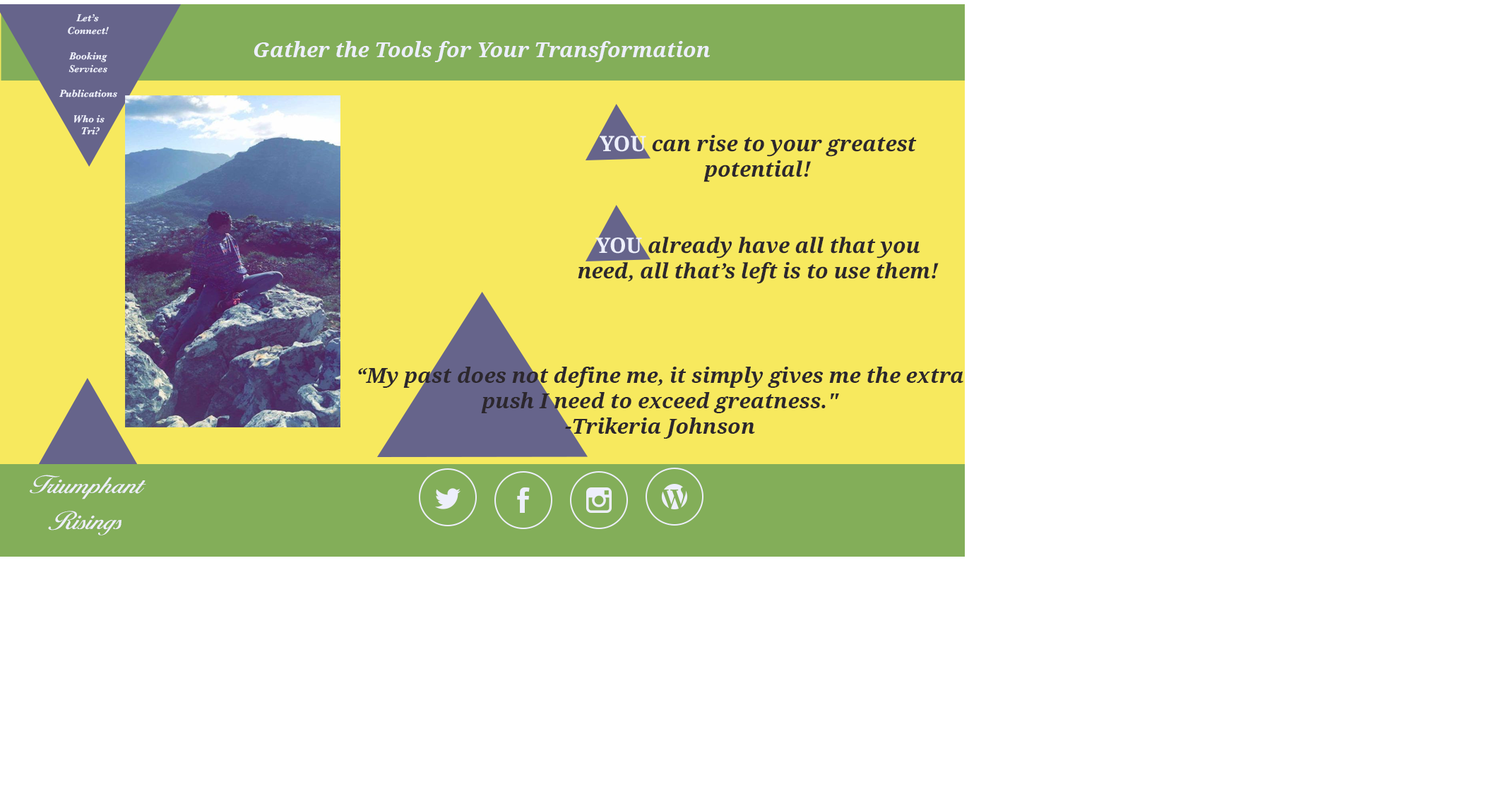
<style>
.page{position:relative;width:1503px;height:794px;background:#ffffff}
.page>*{position:absolute;margin:0}
.t1{font:10.5px "Baskerville-BoldItalic";color:#edeffb;scale:0.95 1}
.t2{font:21.2px "DroidSerif-BoldItalic";color:#edeffb}
.t3{font:21.2px "DroidSerif-BoldItalic";color:#2c272d}
.t4{font:21.2px "DroidSerif-Bold";color:#edeffb}
.t5{font:30px "Cotillion";color:#edeffb;scale:1.1 1}
</style>
<div class="page">
<p class="t1" style="left:59px;top:14px;width:58px;height:121px;text-align:center">Let’s Connect!<br><br>Booking Services<br><br>Publications<br><br>Who is<br> Tri?</p>
<p class="t2" style="left:253px;top:41px;width:457px;height:21px">Gather the Tools for Your Transformation</p>
<p class="t3" style="left:578px;top:135px;width:360px;height:149px;text-align:center"><span class="t4">YOU </span>can rise to your greatest potential!<br><br><br><span class="t4">YOU </span>already have all that you need, all that’s left is to use them!</p>
<p class="t3" style="left:358px;top:366px;width:605px;height:72px;text-align:center">“My past does not define me, it simply gives me the extra push I need to exceed greatness."<br>-Trikeria Johnson</p>
<p class="t5" style="left:30px;top:474px;width:116px;height:61px;text-align:center">Triumphant Risings</p>
</div>
